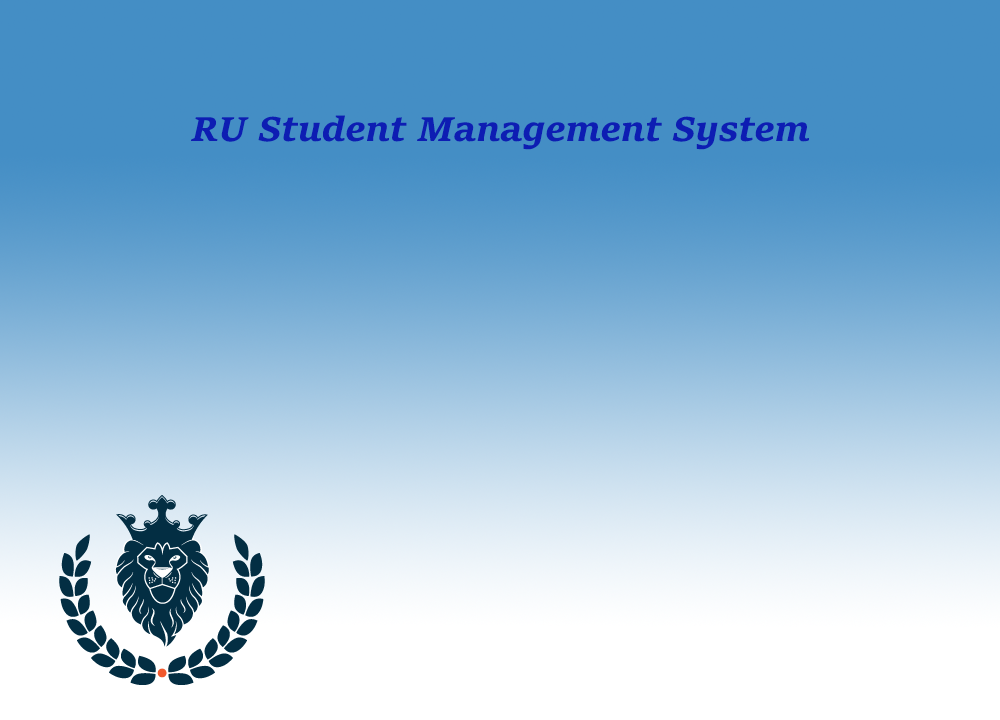
<style>
.page{position:relative;width:1000px;height:720px}
.page>*{position:absolute;margin:0}
.t1{font:36px "SitkaSmall-BoldItalic";color:#0d1db3}
</style>
<div class="page">
<p class="t1" style="left:191px;top:115px;width:618px;height:35px">RU Student Management System</p>
</div>
